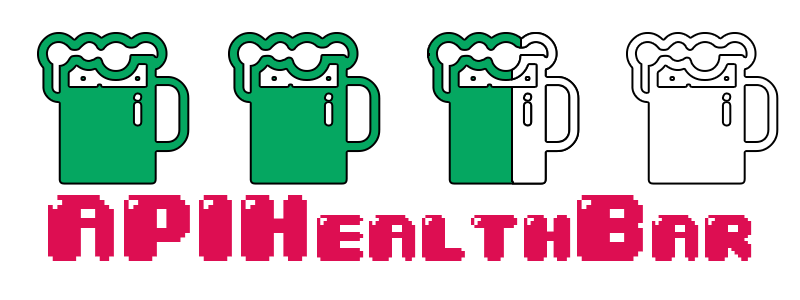
<style>
.page{position:relative;width:800px;height:300px;background:#ffffff}
.page>*{position:absolute;margin:0}
.t1{font:80px "04b30";color:#dd0e52;font-variant:small-caps}
</style>
<div class="page">
<p class="t1" style="left:48px;top:195px;width:704px;height:66px">APIHealthBar</p>
</div>
